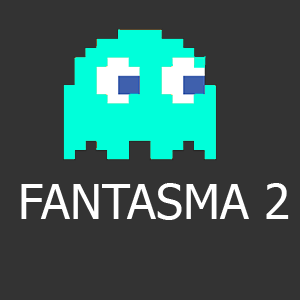
<style>
.page{position:relative;width:300px;height:300px;background:#333333}
.page>*{position:absolute;margin:0}
.t1{font:48px "Tahoma";color:#ffffff}
</style>
<div class="page">
<p class="t1" style="left:21px;top:183px;width:268px;height:37px">FANTASMA 2</p>
</div>
